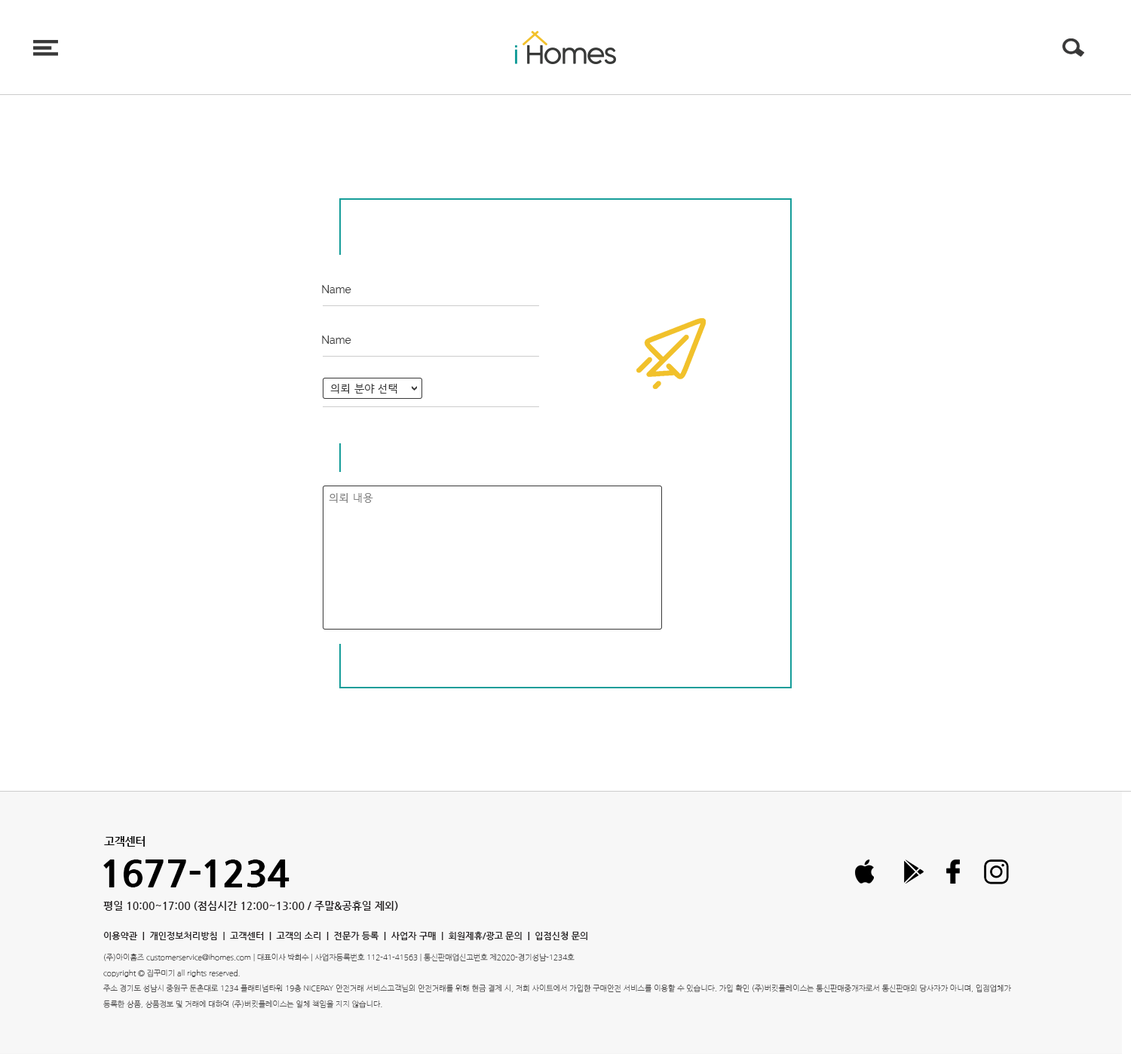
<style>
.page{position:relative;width:1131px;height:1054px;background:#ffffff}
.page>*{position:absolute;margin:0}
.t1{font:10.6px "Raleway-Regular";color:#383838}
.t2{font:10.6px "HCRDotum";color:#383838}
.t3{font:10.6px "HCRDotum";color:#828282}
.t4{font:11.3px "NanumGothicBold";letter-spacing:-0.02em;color:#000000}
.t5{font:37.7px "NanumGothicExtraBold";letter-spacing:-0.02em;color:#000000}
.t6{font:10.6px "NanumGothicBold";color:#231f20}
.t7{font:9px "NanumGothicBold";color:#231f20}
.t8{font:7.5px/15.7px "NanumGothicLight";color:#4f4e4e}
</style>
<div class="page">
<p class="t1" style="left:322px;top:285px;width:29px;height:8px">Name</p>
<p class="t1" style="left:322px;top:336px;width:29px;height:8px">Name</p>
<p class="t2" style="left:330px;top:384px;width:67px;height:10px">의뢰 분야 선택</p>
<p class="t3" style="left:329px;top:493px;width:44px;height:10px">의뢰 내용</p>
<p class="t4" style="left:104px;top:836px;width:41px;height:11px">고객센터</p>
<p class="t5" style="left:103px;top:860px;width:187px;height:28px">1677-1234</p>
<p class="t6" style="left:103px;top:901px;width:295px;height:10px">평일 10:00~17:00 (점심시간 12:00~13:00 / 주말&amp;공휴일 제외)</p>
<p class="t7" style="left:103px;top:931px;width:484px;height:9px">이용약관  |  개인정보처리방침  |  고객센터  |  고객의 소리  |  전문가 등록  |  사업자 구매  |  회원제휴/광고 문의  |  입점신청 문의</p>
<p class="t8" style="left:103px;top:953px;width:908px;height:55px">(주)아이홈즈 customerservice@ihomes.com | 대표이사 박희수 | 사업자등록번호 112-41-41563 | 통신판매업신고번호 제2020-경기성남-1234호  <br>copyright © 집꾸미기 all rights reserved.<br>주소 경기도 성남시 중원구 둔촌대로 1234 플래티넘타워 19층 NICEPAY 안전거래 서비스고객님의 안전거래를 위해 현금 결제 시, 저희 사이트에서 가입한 구매안전 서비스를 이용할 수 있습니다. 가입 확인 (주)버킷플레이스는 통신판매중개자로서 통신판매의 당사자가 아니며, 입점업체가 <br>등록한 상품, 상품정보 및 거래에 대하여 (주)버킷플레이스는 일체 책임을 지지 않습니다.</p>
</div>
